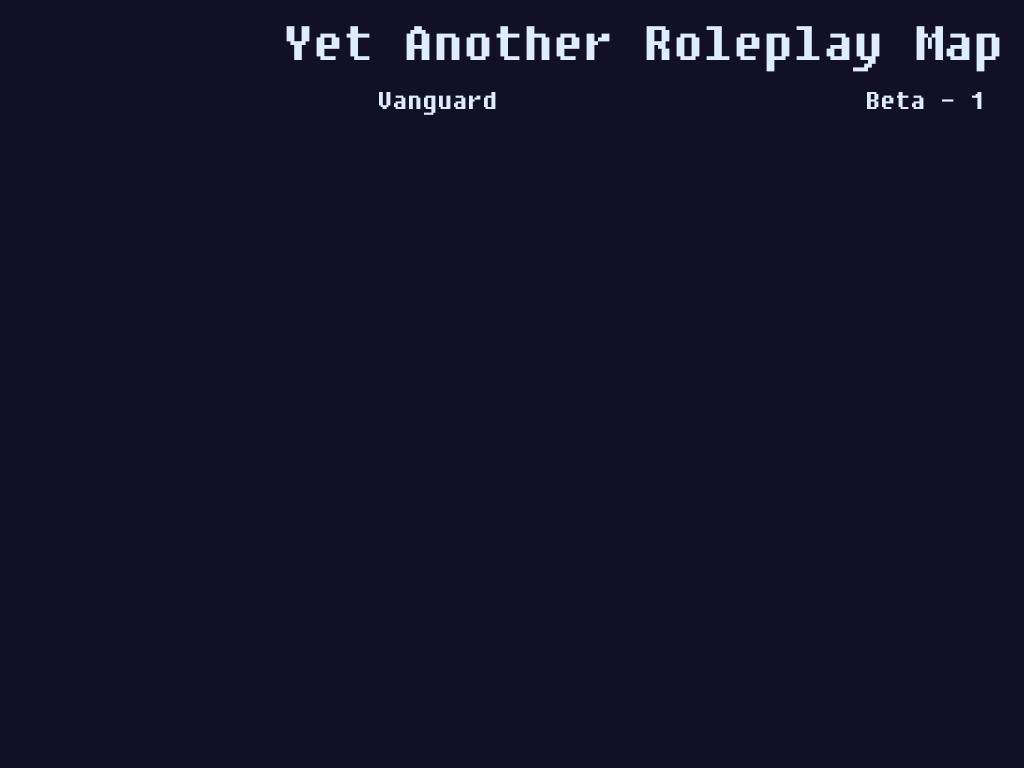
<style>
.page{position:relative;width:1024px;height:768px;background:#120f29}
.page>*{position:absolute;margin:0}
.t1{font:48px "Fixedsys";color:#deecff}
.t2{font:24px "Fixedsys";color:#deecff}
</style>
<div class="page">
<p class="t1" style="left:286px;top:26px;width:714px;height:46px">Yet Another Roleplay Map</p>
<p class="t2" style="left:379px;top:92px;width:117px;height:23px">Vanguard</p>
<p class="t2" style="left:867px;top:92px;width:115px;height:17px">Beta - 1</p>
</div>
